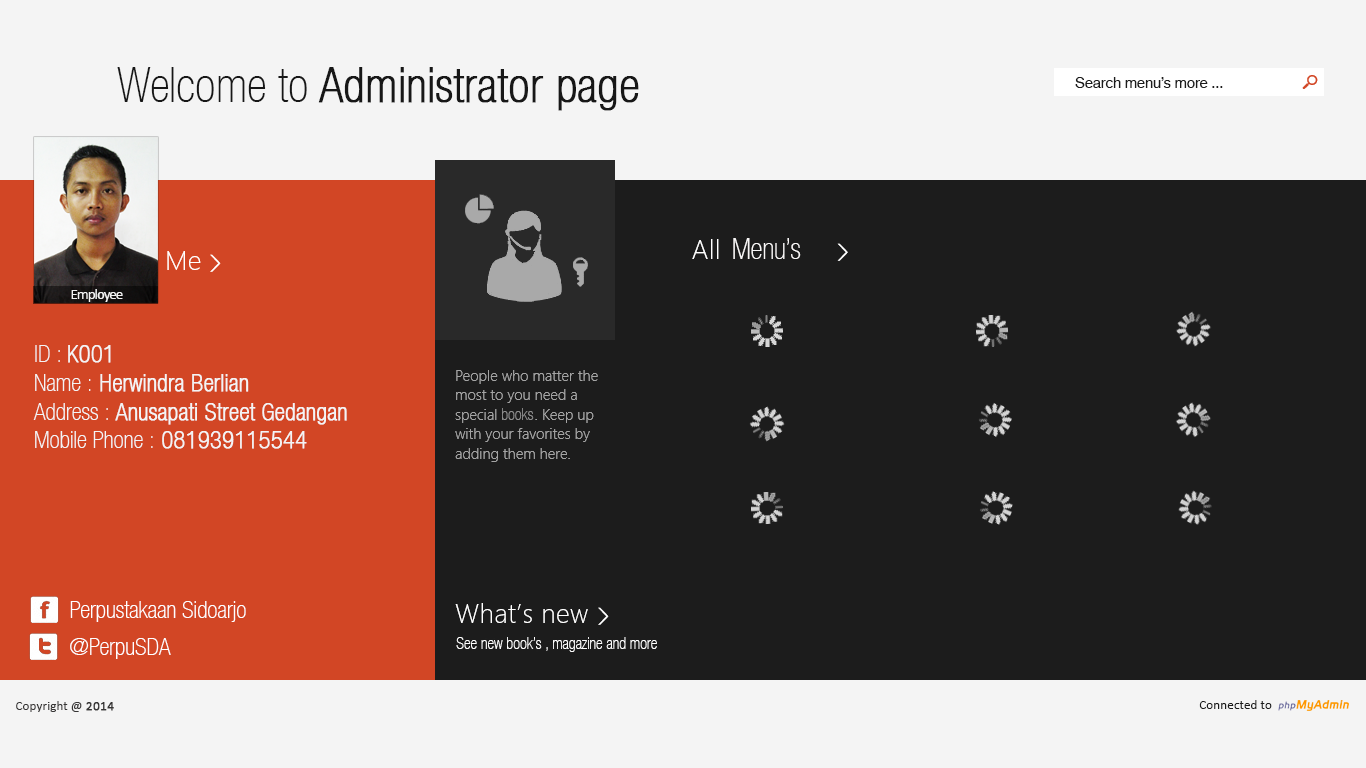
<style>
.page{position:relative;width:1366px;height:768px;background:#1c1c1c}
.page>*{position:absolute;margin:0}
.t1{font:48px "HelveticaNeueLTCom-ThCn";color:#171717;font-weight:bold}
.t2{font:48px "HelveticaNeueLTCom-ThCn";color:#171717}
.t3{font:14.7px "HelveticaWorld-Regular";color:#1c1c1c}
.t4{font:28.7px "HelveticaNeueLTCom-ThCn";color:#f9f7f7}
.t5{font:14.7px "Calibri";letter-spacing:-0.06em;color:#f4f4f4}
.t6{font:24px "HelveticaNeueLTCom-ThCn";color:#f4f4f4;font-weight:bold}
.t7{font:24px "HelveticaNeueLTCom-ThCn";color:#f4f4f4}
.t8{font:16px "HelveticaNeueLTCom-ThCn";color:#8f8f8f}
.t9{font:24px "HelveticaNeueLTCom-ThCn";color:#ffffff}
.t10{font:16px "HelveticaNeueLTCom-ThCn";color:#ffffff}
.t11{font:13.3px "Calibri";color:#363535}
.t12{font:13.3px "Calibri";color:#363535;font-weight:bold}
.t13{font:13.3px "Calibri";color:#1c1c1c}
</style>
<div class="page">
<p class="t1" style="left:117px;top:67px;width:522px;height:44px"><span class="t2">Welcome to</span> Administrator page</p>
<p class="t3" style="left:1075px;top:77px;width:148px;height:11px">Search menu’s more ...</p>
<p class="t4" style="left:733px;top:238px;width:68px;height:21px">Menu’s</p>
<p class="t5" style="left:71px;top:289px;width:52px;height:13px">Employee</p>
<p class="t6" style="left:33px;top:345px;width:314px;height:104px"><span class="t7"><br>ID : </span>K001<br><span class="t7">Name :</span> Herwindra Berlian<br><span class="t7">Address :</span> Anusapati Street Gedangan<br><span class="t7">Mobile Phone :</span> 081939115544</p>
<p class="t8" style="left:502px;top:408px;width:32px;height:12px">books</p>
<p class="t9" style="left:70px;top:601px;width:176px;height:21px">Perpustakaan Sidoarjo</p>
<p class="t9" style="left:70px;top:638px;width:101px;height:21px">@PerpuSDA</p>
<p class="t10" style="left:456px;top:637px;width:201px;height:15px">See new book’s , magazine and more</p>
<p class="t11" style="left:16px;top:701px;width:98px;height:11px">Copyright @ <span class="t12">2014</span></p>
<p class="t13" style="left:1199px;top:700px;width:73px;height:9px">Connected to</p>
</div>
